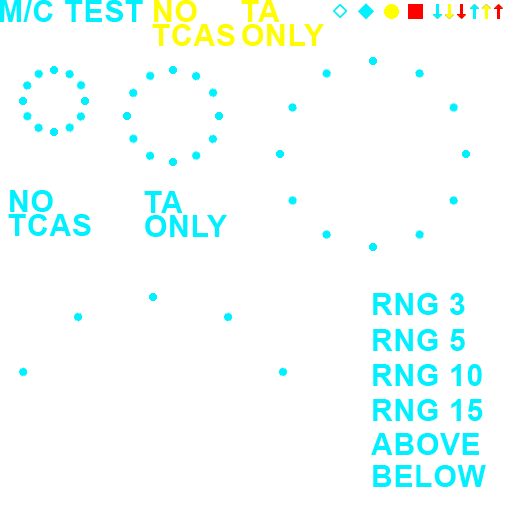
<style>
.page{position:relative;width:512px;height:512px;background:#ffffff}
.page>*{position:absolute;margin:0}
.t1{font:30px "Arial-BoldMT";letter-spacing:0.025em;color:#00f0ff}
.t2{font:30px/24px "Arial-BoldMT";letter-spacing:0.025em;color:#fffc00}
.t3{font:30px/24px "Arial-BoldMT";letter-spacing:0.025em;color:#00f0ff}
</style>
<div class="page">
<p class="t1" style="left:0px;top:0px;width:53px;height:22px">M/C</p>
<p class="t1" style="left:65px;top:0px;width:78px;height:22px">TEST</p>
<p class="t2" style="left:152px;top:0px;width:83px;height:46px">NO<br>TCAS</p>
<p class="t2" style="left:241px;top:0px;width:83px;height:46px">TA<br>ONLY</p>
<p class="t3" style="left:8px;top:190px;width:83px;height:46px">NO <br>TCAS</p>
<p class="t3" style="left:144px;top:191px;width:83px;height:46px">TA<br>ONLY</p>
<p class="t1" style="left:373px;top:293px;width:92px;height:22px">RNG 3</p>
<p class="t1" style="left:373px;top:329px;width:92px;height:22px">RNG 5</p>
<p class="t1" style="left:373px;top:364px;width:109px;height:22px">RNG 10</p>
<p class="t1" style="left:373px;top:399px;width:110px;height:22px">RNG 15</p>
<p class="t1" style="left:371px;top:433px;width:108px;height:22px">ABOVE</p>
<p class="t1" style="left:373px;top:465px;width:113px;height:22px">BELOW</p>
</div>
